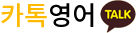
<style>
.page{position:relative;width:136px;height:33px;background:#ffffff}
.page>*{position:absolute;margin:0}
.t1{font:26.2px "SourceHanSansKR-Medium";color:#ffba00}
.t2{font:26.2px "SourceHanSansKR-Medium";color:#000000}
</style>
<div class="page">
<p class="t1" style="left:1px;top:3px;width:93px;height:25px">카톡<span class="t2">영어</span></p>
</div>
